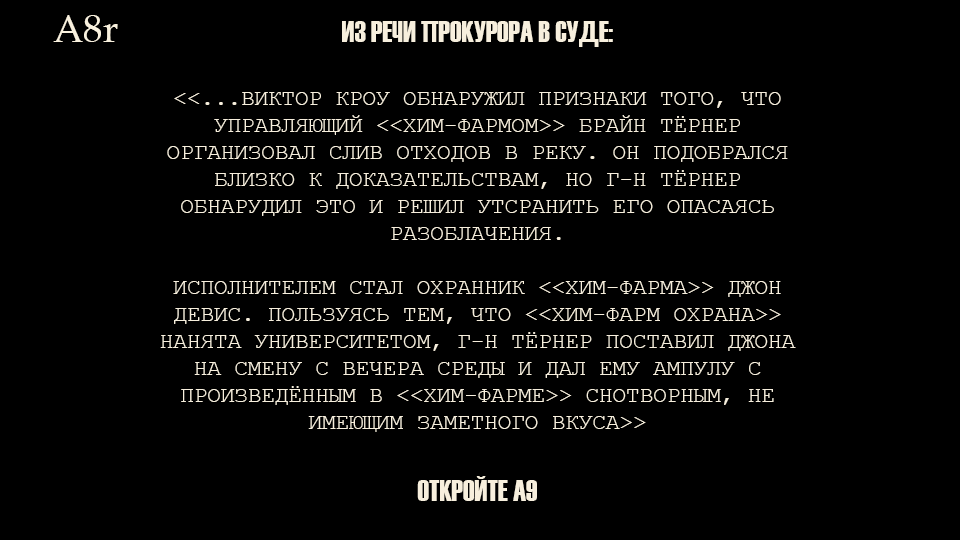
<style>
.page{position:relative;width:960px;height:540px;background:#000000}
.page>*{position:absolute;margin:0}
.t1{font:38.8px "BookAntiqua";color:#f9f1de}
.t2{font:22.5px "CourierNewPSMT";color:#f7efdd;text-transform:uppercase}
.t3{font:30px "Haettenschweiler";color:#f7efdd;text-transform:uppercase}
</style>
<div class="page">
<p class="t1" style="left:53px;top:15px;width:65px;height:27px">A8r</p>
<p class="t2" style="left:160px;top:21px;width:636px;height:480px;text-align:center"><span class="t3">Из речи прокурора в суде:<br><br></span>&lt;&lt;...Виктор Кроу обнаружил признаки того, что управляющий &lt;&lt;Хим-Фармом&gt;&gt; Брайн Тёрнер организовал слив отходов в реку. Он подобрался близко к доказательствам, но г-н Тёрнер обнарудил это и решил утсранить его опасаясь разоблачения.<br><br>Исполнителем стал охранник &lt;&lt;Хим-Фарма&gt;&gt; Джон Девис. Пользуясь тем, что &lt;&lt;Хим-Фарм охрана&gt;&gt; нанята Университетом, г-н Тёрнер поставил Джона на смену с вечера среды и дал ему ампулу с произведённым в &lt;&lt;Хим-Фарме&gt;&gt; снотворным, не имеющим заметного вкуса&gt;&gt;<br><span class="t3">  <br>Откройте A9</span></p>
</div>
